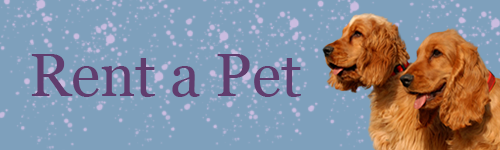
<style>
.page{position:relative;width:500px;height:150px;background:#7ea0bc}
.page>*{position:absolute;margin:0}
.t1{font:60px "Georgia";color:#613d6e}
</style>
<div class="page">
<p class="t1" style="left:31px;top:54px;width:270px;height:43px">Rent a Pet</p>
</div>
